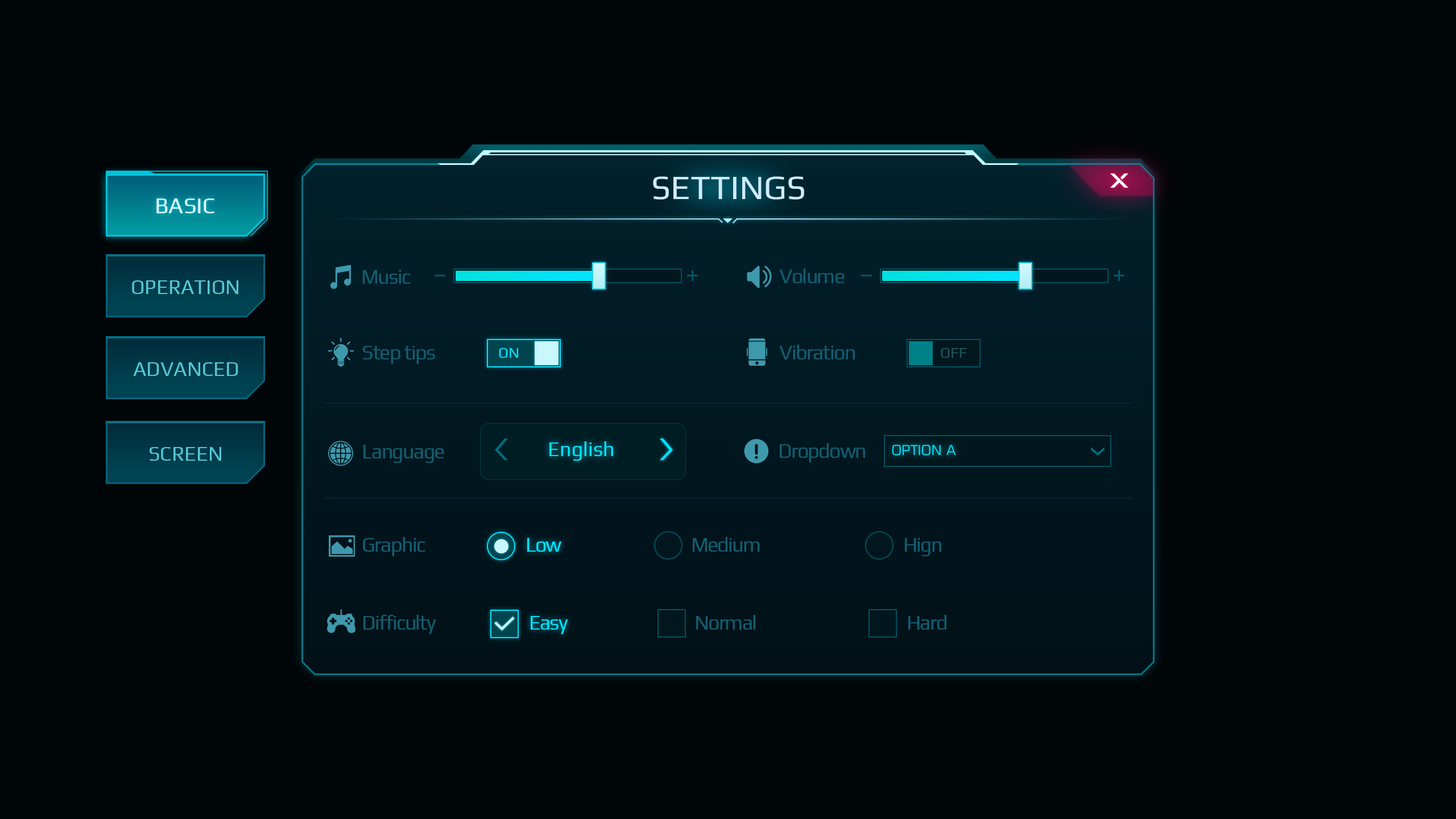
<style>
.page{position:relative;width:1456px;height:819px;background:#000507}
.page>*{position:absolute;margin:0}
.t1{font:34.1px "Play-Regular";color:#b7dbff}
.t2{font:22.7px "Play-Regular";color:#defcff;text-transform:uppercase}
.t3{font:20.5px "Play-Regular";letter-spacing:-0.05em;color:#135e71}
.t4{font:20.5px "Play-Regular";color:#56c7d4;text-transform:uppercase}
.t5{font:20.5px "Play-Regular";letter-spacing:-0.05em;color:#135f72}
.t6{font:14.8px "Play-Regular";color:#00e4ff}
.t7{font:14.8px "Play-Regular";color:#1b575e}
.t8{font:20.5px "Play-Regular";color:#55c7d4;text-transform:uppercase}
.t9{font:20.5px "Play-Regular";color:#00e4ff}
.t10{font:13.6px "Square721BT-Roman";color:#00e4ff;text-transform:uppercase}
.t11{font:20.5px "Play-Regular";letter-spacing:-0.05em;color:#00e4ff}
</style>
<div class="page">
<p class="t1" style="left:653px;top:176px;width:151px;height:24px">SETTINGS</p>
<p class="t2" style="left:156px;top:198px;width:58px;height:15px">Basic</p>
<p class="t2" style="left:156px;top:198px;width:58px;height:15px">Basic</p>
<p class="t3" style="left:779px;top:268px;width:66px;height:15px">Volume</p>
<p class="t4" style="left:132px;top:280px;width:106px;height:14px">Operation</p>
<p class="t5" style="left:363px;top:270px;width:48px;height:14px">Music</p>
<p class="t3" style="left:363px;top:346px;width:72px;height:18px">Step tips</p>
<p class="t6" style="left:499px;top:348px;width:19px;height:10px">ON</p>
<p class="t3" style="left:779px;top:345px;width:76px;height:14px">Vibration</p>
<p class="t7" style="left:941px;top:348px;width:26px;height:10px">OFF</p>
<p class="t8" style="left:133px;top:362px;width:105px;height:14px">Advanced</p>
<p class="t8" style="left:150px;top:447px;width:71px;height:14px">Screen</p>
<p class="t3" style="left:363px;top:445px;width:81px;height:18px">Language</p>
<p class="t9" style="left:549px;top:441px;width:64px;height:20px">English</p>
<p class="t3" style="left:780px;top:443px;width:85px;height:19px">Dropdown</p>
<p class="t10" style="left:892px;top:445px;width:64px;height:11px">option a</p>
<p class="t3" style="left:363px;top:537px;width:62px;height:19px">Graphic</p>
<p class="t11" style="left:527px;top:538px;width:35px;height:14px">Low</p>
<p class="t3" style="left:693px;top:537px;width:67px;height:15px">Medium</p>
<p class="t3" style="left:905px;top:538px;width:36px;height:18px">Hign</p>
<p class="t3" style="left:363px;top:615px;width:73px;height:19px">Difficulty</p>
<p class="t11" style="left:531px;top:616px;width:37px;height:18px">Easy</p>
<p class="t3" style="left:696px;top:615px;width:59px;height:15px">Normal</p>
<p class="t3" style="left:908px;top:615px;width:38px;height:15px">Hard</p>
</div>
